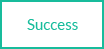
<style>
.page{position:relative;width:104px;height:49px;background:#ffffff}
.page>*{position:absolute;margin:0}
.t1{font:15px "Lato-Regular";color:#18bc9c}
</style>
<div class="page">
<p class="t1" style="left:27px;top:19px;width:51px;height:11px">Success</p>
</div>
